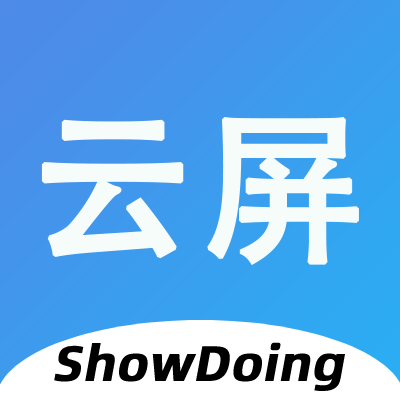
<style>
.page{position:relative;width:400px;height:400px}
.page>*{position:absolute;margin:0}
.t1{font:166.7px "AdobeHeitiStd-Regular";color:#f6fcfa;font-weight:bold}
.t2{font:50px "AlibabaPuHuiTi-Bold";color:#000000;font-weight:bold;font-style:italic}
</style>
<div class="page">
<p class="t1" style="left:41px;top:116px;width:318px;height:149px">云屏</p>
<p class="t2" style="left:54px;top:342px;width:292px;height:49px">ShowDoing</p>
</div>
